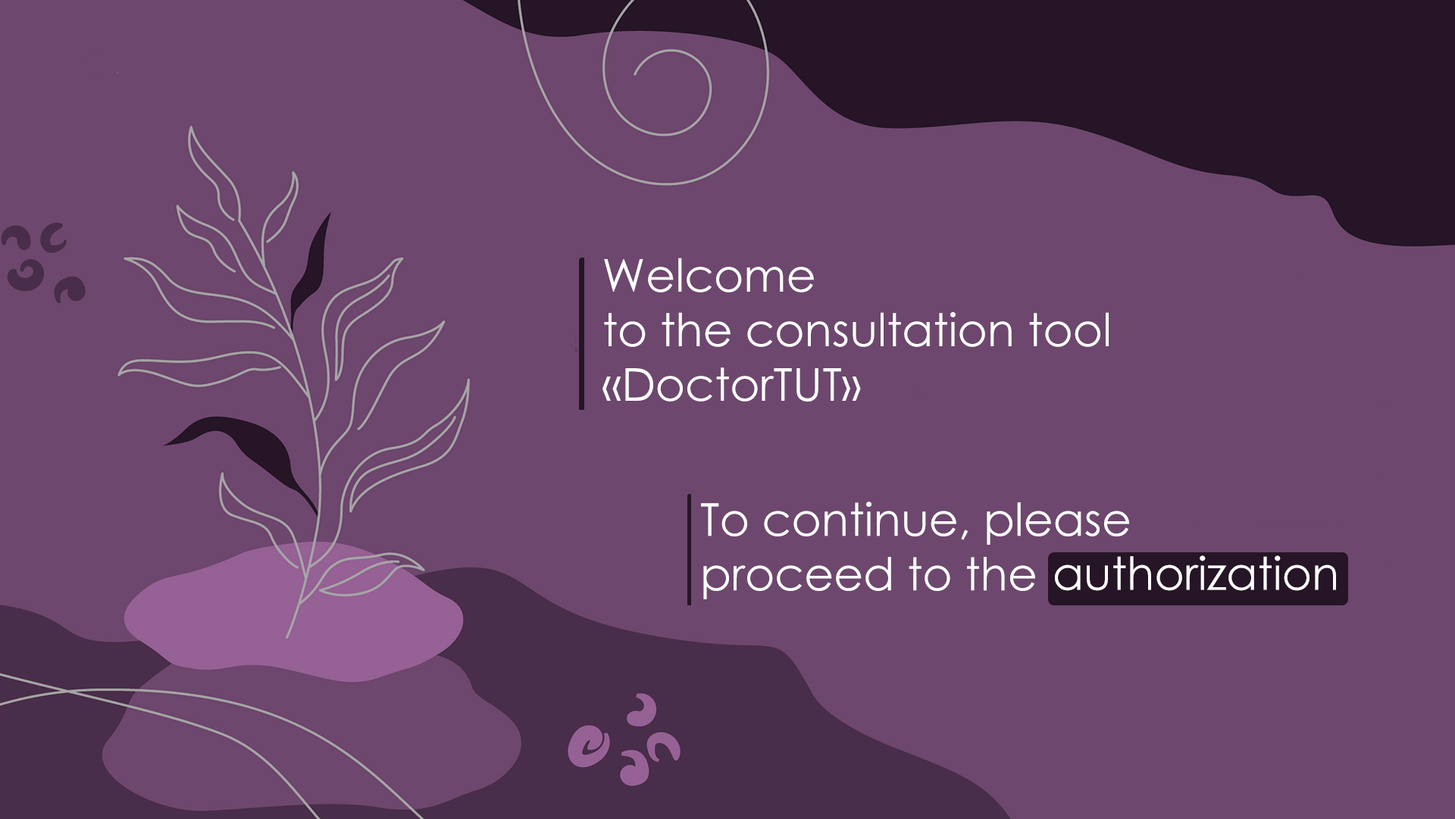
<style>
.page{position:relative;width:1455px;height:819px;background:#6d476d}
.page>*{position:absolute;margin:0}
.t1{font:45.5px "CenturyGothic";color:#ffffff}
</style>
<div class="page">
<p class="t1" style="left:603px;top:258px;width:506px;height:144px">Welcome<br>to the consultation tool<br>«DoctorTUT»</p>
<p class="t1" style="left:701px;top:502px;width:428px;height:98px">To continue, please<br>proceed to the</p>
<p class="t1" style="left:1055px;top:556px;width:281px;height:35px">authorization</p>
</div>
